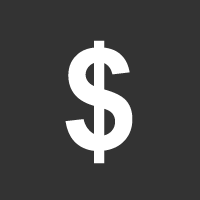
<style>
.page{position:relative;width:200px;height:200px;background:#333333}
.page>*{position:absolute;margin:0}
.t1{font:140px "Arial-BoldMT";color:#ffffff}
</style>
<div class="page">
<p class="t1" style="left:65px;top:40px;width:68px;height:124px">$</p>
</div>
